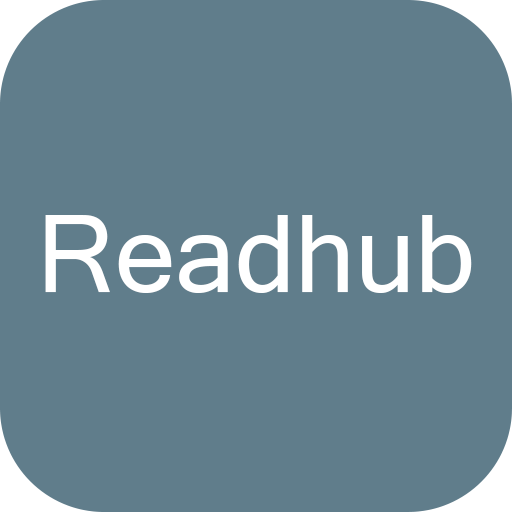
<style>
.page{position:relative;width:512px;height:512px;background:#607d8b}
.page>*{position:absolute;margin:0}
.t1{font:120px "Vrinda";color:#ffffff}
</style>
<div class="page">
<p class="t1" style="left:45px;top:215px;width:427px;height:78px">Readhub</p>
</div>
